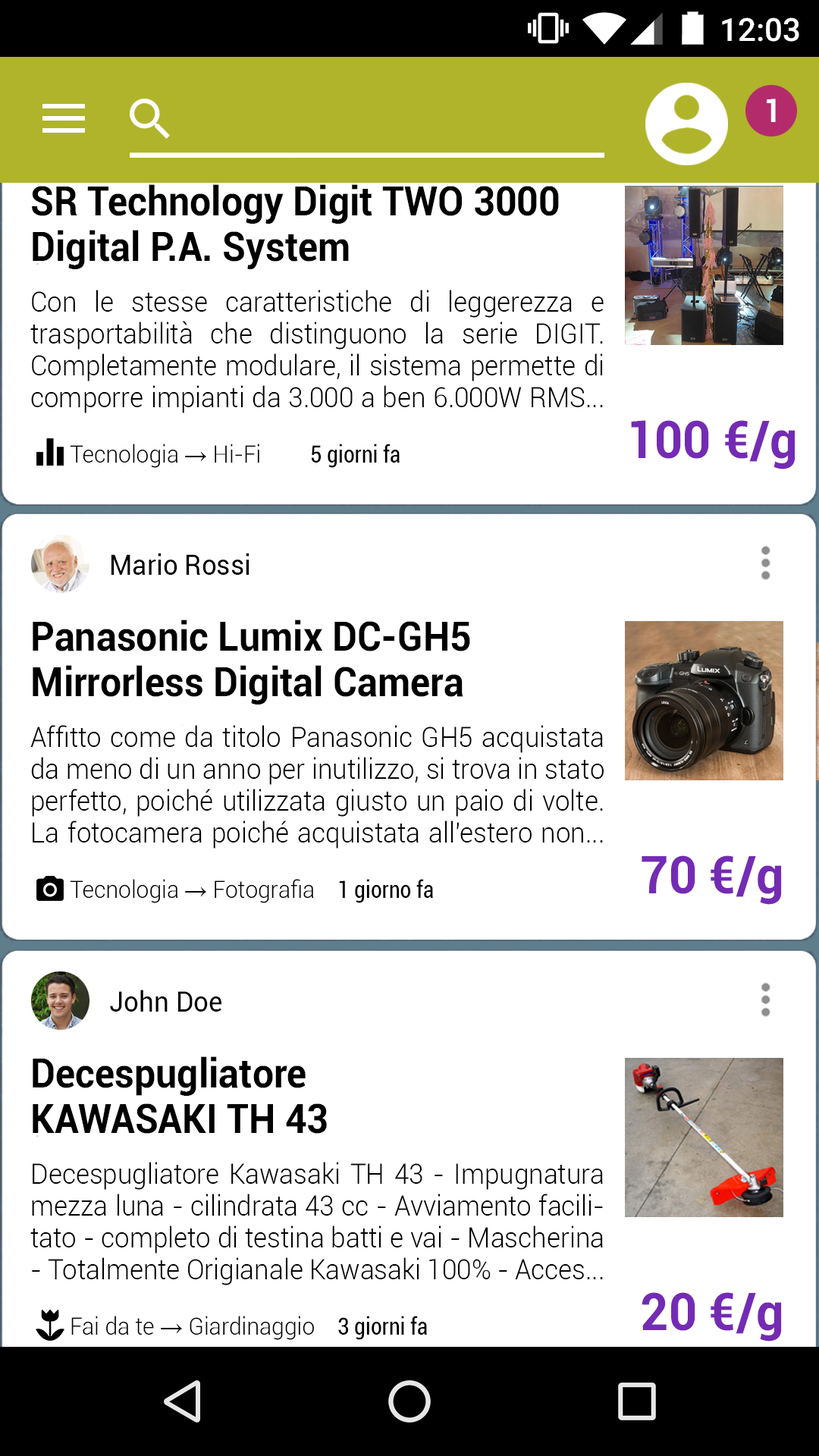
<style>
.page{position:relative;width:819px;height:1456px;background:#ffffff}
.page>*{position:absolute;margin:0}
.t1{font:32.2px "Roboto-Bold";color:#ffffff;scale:0.94 1}
.t2{font:40.2px "Roboto-Bold";color:#000000;scale:0.94 1}
.t3{font:28.1px "Roboto-Light";color:#000000;scale:0.94 1}
.t4{font:52.2px "Roboto-Bold";color:#742bb4;scale:0.94 1}
.t5{font:24.1px "Roboto-Condensed";color:#000000;scale:0.94 1}
.t6{font:24.1px "Roboto-Light";color:#000000;scale:0.94 1}
.t7{font:24.1px "TimesNewRomanPSMT";color:#000000;scale:0.94 1}
.t8{font:28.1px "Roboto-Regular";color:#000000;scale:0.94 1}
</style>
<div class="page">
<p class="t1" style="left:767px;top:99px;width:9px;height:23px">1</p>
<p class="t2" style="left:32px;top:184px;width:527px;height:85px">SR Technology Digit TWO 3000 Digital P.A. System</p>
<p class="t3" style="left:30px;top:290px;width:574px;height:123px;text-align:justify">Con le stesse caratteristiche di leggerezza e trasportabilità che distinguono la serie DIGIT. Completamente modulare, il sistema permette di comporre impianti da 3.000 a ben 6.000W RMS...</p>
<p class="t4" style="left:631px;top:420px;width:164px;height:49px">100 €/g</p>
<p class="t5" style="left:70px;top:444px;width:330px;height:24px"><span class="t6">Tecnologia </span><span class="t7">→ </span><span class="t6">Hi-Fi     </span>5 giorni fa</p>
<p class="t8" style="left:111px;top:553px;width:138px;height:22px">Mario Rossi</p>
<p class="t2" style="left:33px;top:620px;width:437px;height:84px">Panasonic Lumix DC-GH5 <br>Mirrorless Digital Camera</p>
<p class="t3" style="left:30px;top:725px;width:574px;height:124px;text-align:justify">Affitto come da titolo Panasonic GH5 acquistata da meno di un anno per inutilizzo, si trova in stato perfetto, poiché utilizzata giusto un paio di volte.<br>La fotocamera poiché acquistata all'estero non...</p>
<p class="t4" style="left:642px;top:855px;width:140px;height:50px">70 €/g</p>
<p class="t5" style="left:70px;top:879px;width:363px;height:24px"><span class="t6">Tecnologia </span><span class="t7">→ </span><span class="t6">Fotografia     </span>1 giorno fa</p>
<p class="t8" style="left:110px;top:990px;width:111px;height:22px">John Doe</p>
<p class="t2" style="left:33px;top:1056px;width:294px;height:78px">Decespugliatore <br>KAWASAKI TH 43</p>
<p class="t3" style="left:30px;top:1162px;width:573px;height:123px;text-align:justify">Decespugliatore Kawasaki TH 43 - Impugnatura mezza luna - cilindrata 43 cc - Avviamento facilitato - completo di testina batti e vai - Mascherina - Totalmente Origianale Kawasaki 100% - Acces...</p>
<p class="t4" style="left:642px;top:1292px;width:140px;height:49px">20 €/g</p>
<p class="t6" style="left:71px;top:1316px;width:356px;height:24px">Fai da te <span class="t7">→ </span>Giardinaggio     <span class="t5">3 giorni fa</span></p>
</div>
